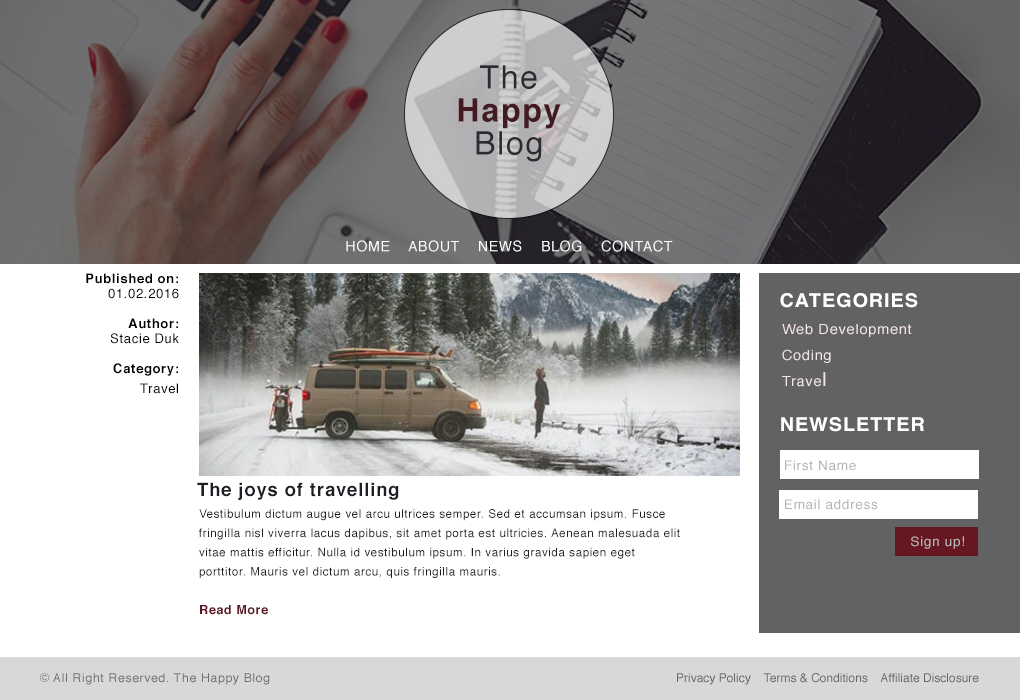
<style>
.page{position:relative;width:1020px;height:700px;background:#ffffff}
.page>*{position:absolute;margin:0}
.t1{font:32.1px/33px "Helvetica-Bold";letter-spacing:0.05em;color:#431a21}
.t2{font:32.1px/33px "Helvetica";letter-spacing:0.05em;color:#2c2b2f}
.t3{font:14.2px "Helvetica";letter-spacing:0.05em;color:#ffffff;text-transform:uppercase}
.t4{font:13px/15px "Helvetica-Bold";letter-spacing:0.05em;color:#000000}
.t5{font:13px/15px "Helvetica";letter-spacing:0.05em;color:#000000}
.t6{font:13px/20px "Helvetica";letter-spacing:0.05em;color:#000000}
.t7{font:19px "Helvetica-Bold";letter-spacing:0.05em;color:#ffffff;text-transform:uppercase;scale:1.04 1}
.t8{font:14px/26px "Helvetica";letter-spacing:0.05em;color:#f3e6e9;scale:1.04 1}
.t9{font:19px/26px "Helvetica";letter-spacing:0.05em;color:#f3e6e9;scale:1.04 1}
.t10{font:13px "Helvetica";letter-spacing:0.05em;color:#b5b5b5;scale:1.04 1}
.t11{font:18.3px "Helvetica-Bold";letter-spacing:0.05em;color:#211d25}
.t12{font:11.6px/19.3px "Helvetica";letter-spacing:0.05em;color:#211d25}
.t13{font:12.5px/19.3px "Helvetica-Bold";letter-spacing:0.05em;color:#601623}
.t14{font:12px "Helvetica";letter-spacing:0.05em;color:#6e6e6f}
.t15{font:12px "Helvetica";color:#666666}
</style>
<div class="page">
<p class="t1" style="left:458px;top:65px;width:103px;height:97px;text-align:center"><span class="t2">The<br></span>Happy<br><span class="t2">Blog</span></p>
<p class="t3" style="left:346px;top:240px;width:327px;height:12px">Home    About    News    Blog    Contact</p>
<p class="t4" style="left:86px;top:273px;width:93px;height:121px;text-align:right">Published on:<br><span class="t5">01.02.2016<br><br></span>Author:<br><span class="t5">Stacie Duk<br><br></span>Category:<br><span class="t5">Trave</span><span class="t6">l</span></p>
<p class="t7" style="left:780px;top:293px;width:138px;height:15px">Categories</p>
<p class="t8" style="left:782px;top:324px;width:130px;height:63px">Web Development<br>Coding<br>Trave<span class="t9">l</span></p>
<p class="t7" style="left:781px;top:417px;width:143px;height:15px">Newsletter</p>
<p class="t10" style="left:785px;top:460px;width:71px;height:11px">First Name</p>
<p class="t11" style="left:197px;top:482px;width:202px;height:18px">The joys of travelling</p>
<p class="t12" style="left:199px;top:509px;width:481px;height:106px">Vestibulum dictum augue vel arcu ultrices semper. Sed et accumsan ipsum. Fusce fringilla nisl viverra lacus dapibus, sit amet porta est ultricies. Aenean malesuada elit vitae mattis efficitur. Nulla id vestibulum ipsum. In varius gravida sapien eget <br>porttitor. Mauris vel dictum arcu, quis fringilla mauris.<br><br><span class="t13">Read More</span></p>
<p class="t10" style="left:785px;top:499px;width:93px;height:11px">Email address</p>
<p class="t10" style="left:911px;top:536px;width:53px;height:13px">Sign up!</p>
<p class="t14" style="left:40px;top:673px;width:230px;height:12px">© All Right Reserved. The Happy Blog</p>
<p class="t15" style="left:677px;top:673px;width:302px;height:12px">Privacy Policy    Terms &amp; Conditions    Affiliate Disclosure</p>
</div>
